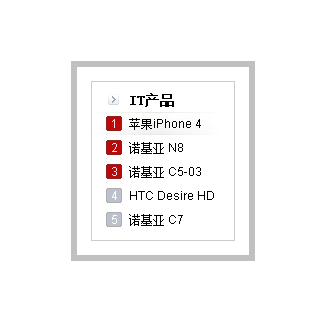
<style>
.page{position:relative;width:327px;height:331px;background:#ffffff}
.page>*{position:absolute;margin:0}
.t1{font:12px/24px "ArialMT";color:#010100}
.t2{font:14px/25px "SimSun";color:#010100;font-weight:bold}
.t3{font:12px/24px "SimSun";color:#010100}
.t4{font:12px "ArialMT";color:#ffdfec}
.t5{font:12px "ArialMT";color:#ffffff}
</style>
<div class="page">
<p class="t1" style="left:129px;top:93px;width:85px;height:133px"><span class="t2">IT产品<br></span><span class="t3">苹果</span>iPhone 4<br><span class="t3">诺基亚</span> N8<br><span class="t3">诺基亚</span> C5-03<br>HTC Desire HD<br><span class="t3">诺基亚</span> C7</p>
<p class="t4" style="left:112px;top:119px;width:3px;height:9px">1</p>
<p class="t4" style="left:112px;top:143px;width:5px;height:9px">2</p>
<p class="t4" style="left:112px;top:167px;width:5px;height:9px">3</p>
<p class="t5" style="left:112px;top:191px;width:5px;height:9px">4</p>
<p class="t5" style="left:112px;top:215px;width:5px;height:9px">5</p>
</div>
